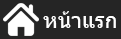
<style>
.page{position:relative;width:121px;height:39px;background:#252525}
.page>*{position:absolute;margin:0}
.t1{font:22px "Tahoma";color:#ffffff}
</style>
<div class="page">
<p class="t1" style="left:43px;top:11px;width:73px;height:17px">หน้าแรก</p>
</div>
